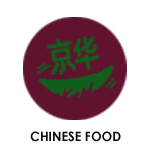
<style>
.page{position:relative;width:150px;height:150px;background:#ffffff}
.page>*{position:absolute;margin:0}
.t1{font:12.7px "CenturyGothic-Bold";color:#0c0d0d}
</style>
<div class="page">
<p class="t1" style="left:30px;top:131px;width:91px;height:11px">CHINESE FOOD</p>
</div>
